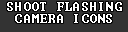
<style>
.page{position:relative;width:128px;height:32px;background:#333333}
.page>*{position:absolute;margin:0}
.t1{font:12px/12px "Terminal";letter-spacing:0.075em;color:#ffffff}
</style>
<div class="page">
<p class="t1" style="left:7px;top:2px;width:115px;height:21px;text-align:center">SHOOT FLASHING<br>CAMERA ICONS</p>
</div>
